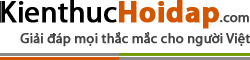
<style>
.page{position:relative;width:250px;height:60px;background:#ffffff}
.page>*{position:absolute;margin:0}
.t1{font:14px "MyriadPro-Regular";color:#444444;font-weight:bold}
</style>
<div class="page">
<p class="t1" style="left:20px;top:32px;width:231px;height:15px">Giải đáp mọi thắc mắc cho người Việt</p>
</div>
